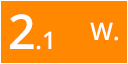
<style>
.page{position:relative;width:128px;height:64px;background:#ff8800}
.page>*{position:absolute;margin:0}
.t1{font:24px "OpenSans-Semibold";color:#ffffff}
.t2{font:48px "OpenSans-Semibold";color:#ffffff}
</style>
<div class="page">
<p class="t1" style="left:10px;top:14px;width:42px;height:36px"><span class="t2">2</span>.1</p>
<p class="t1" style="left:90px;top:22px;width:28px;height:19px">W.</p>
</div>
